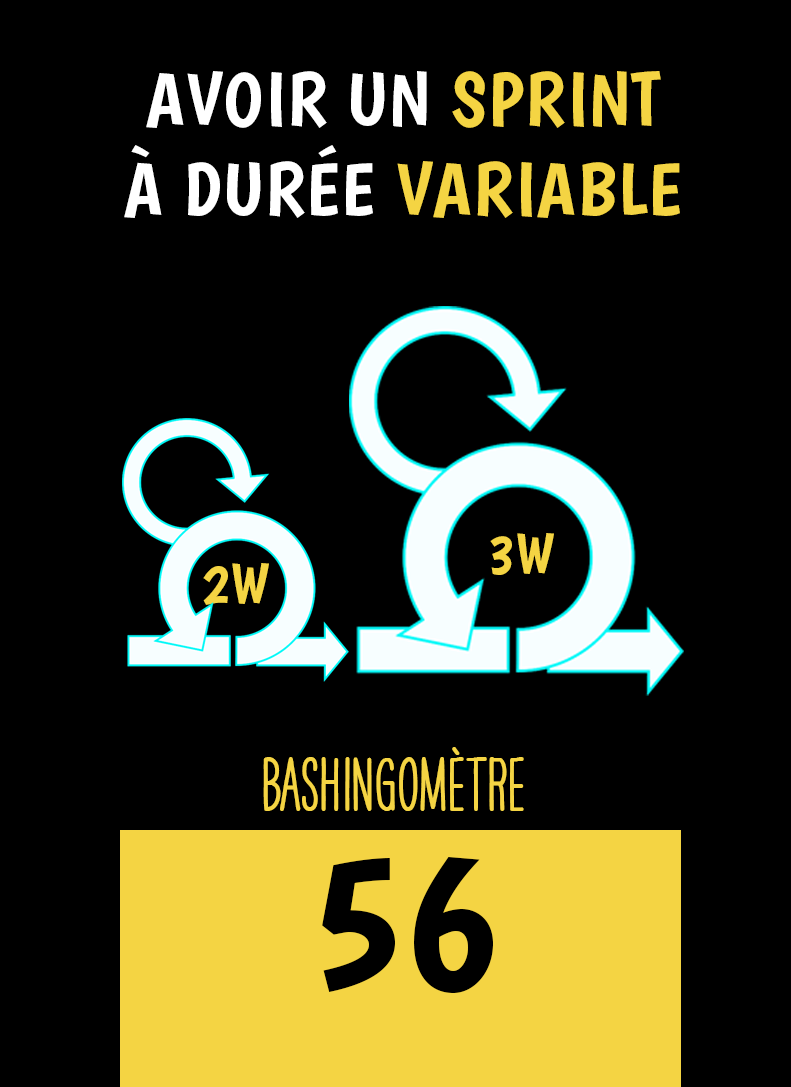
<style>
.page{position:relative;width:791px;height:1087px;background:#000000}
.page>*{position:absolute;margin:0}
.t1{font:75px "Boogaloo-Regular";letter-spacing:0.02em;color:#ffffff}
.t2{font:75px "Boogaloo-Regular";letter-spacing:0.02em;color:#f4d443}
.t3{font:58.3px "Boogaloo-Regular";color:#f4d443}
.t4{font:66.7px "HAVEANICEDAYTallW04-Bold";color:#f4d443}
.t5{font:200px "Boogaloo-Regular";color:#000000}
</style>
<div class="page">
<p class="t1" style="left:124px;top:71px;width:556px;height:147px;text-align:center">AVOIR UN <span class="t2">SPRINT<br></span>À DURÉE <span class="t2">VARIABLE</span></p>
<p class="t3" style="left:490px;top:533px;width:64px;height:42px">3W</p>
<p class="t3" style="left:203px;top:563px;width:66px;height:42px">2W</p>
<p class="t4" style="left:263px;top:747px;width:261px;height:64px">BASHINgomètre</p>
<p class="t5" style="left:322px;top:857px;width:171px;height:136px">56</p>
</div>
